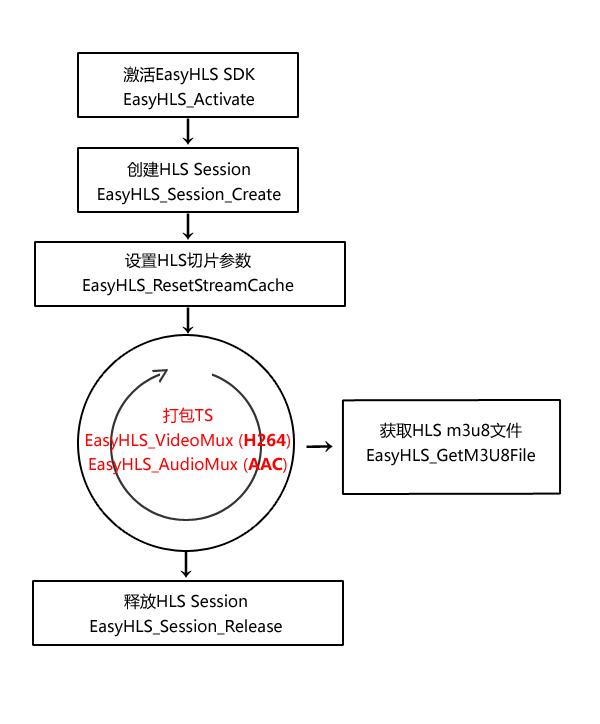
<style>
.page{position:relative;width:600px;height:724px;background:#ffffff}
.page>*{position:absolute;margin:0}
.t1{font:16px/24.6px "MicrosoftYaHei";color:#000000}
.t2{font:30px "MicrosoftYaHei";color:#000000}
.t3{font:30px "MicrosoftYaHei";color:#333333}
.t4{font:16px/24.6px "MicrosoftYaHei";color:#ff0000}
.t5{font:16px/24.6px "MicrosoftYaHei-Bold";color:#ff0000}
</style>
<div class="page">
<p class="t1" style="left:123px;top:66px;width:132px;height:44px;text-align:center">激活EasyHLS SDK<br>EasyHLS_Activate</p>
<p class="t2" style="left:182px;top:118px;width:12px;height:27px">↓</p>
<p class="t1" style="left:98px;top:161px;width:183px;height:44px;text-align:center">创建HLS Session<br>EasyHLS_Session_Create</p>
<p class="t2" style="left:182px;top:213px;width:12px;height:27px">↓</p>
<p class="t1" style="left:83px;top:252px;width:211px;height:44px;text-align:center">设置HLS切片参数<br>EasyHLS_ResetStreamCache</p>
<p class="t2" style="left:182px;top:307px;width:12px;height:27px">↓</p>
<p class="t3" style="left:151px;top:369px;width:17px;height:14px;rotate:-33deg">&gt;</p>
<p class="t4" style="left:86px;top:407px;width:204px;height:68px;text-align:center">打包TS<br>EasyHLS_VideoMux (<span class="t5">H264</span>)<br>EasyHLS_AudioMux (<span class="t5">AAC</span>)</p>
<p class="t1" style="left:367px;top:422px;width:168px;height:44px;text-align:center">获取HLS m3u8文件<br>EasyHLS_GetM3U8File</p>
<p class="t2" style="left:306px;top:441px;width:27px;height:11px;rotate:-90deg">↓</p>
<p class="t2" style="left:180px;top:551px;width:12px;height:27px">↓</p>
<p class="t1" style="left:90px;top:593px;width:192px;height:44px;text-align:center">释放HLS Session<br>EasyHLS_Session_Release</p>
</div>
